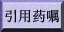
<style>
.page{position:relative;width:64px;height:32px}
.page>*{position:absolute;margin:0}
.t1{font:14px "SimSun";color:#010101}
</style>
<div class="page">
<p class="t1" style="left:5px;top:9px;width:54px;height:14px">引用药嘱</p>
</div>
